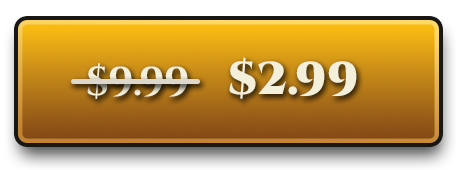
<style>
.page{position:relative;width:461px;height:170px}
.page>*{position:absolute;margin:0}
.t1{font:40.2px "Cinzel-Bold";color:#f4efda}
.t2{font:46px "Cinzel-Black";color:#f4efda}
</style>
<div class="page">
<p class="t1" style="left:87px;top:63px;width:101px;height:36px">$9.99</p>
<p class="t2" style="left:229px;top:57px;width:128px;height:42px">$2.99</p>
</div>
